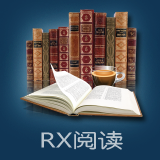
<style>
.page{position:relative;width:160px;height:160px}
.page>*{position:absolute;margin:0}
.t1{font:20px "MicrosoftYaHei";color:#ccd4da;scale:1.28 1}
.t2{font:20px "ZhunYuan";color:#ccd4da;scale:1.28 1}
</style>
<div class="page">
<p class="t1" style="left:41px;top:130px;width:82px;height:20px;opacity:0.9">RX<span class="t2">阅读</span></p>
</div>
